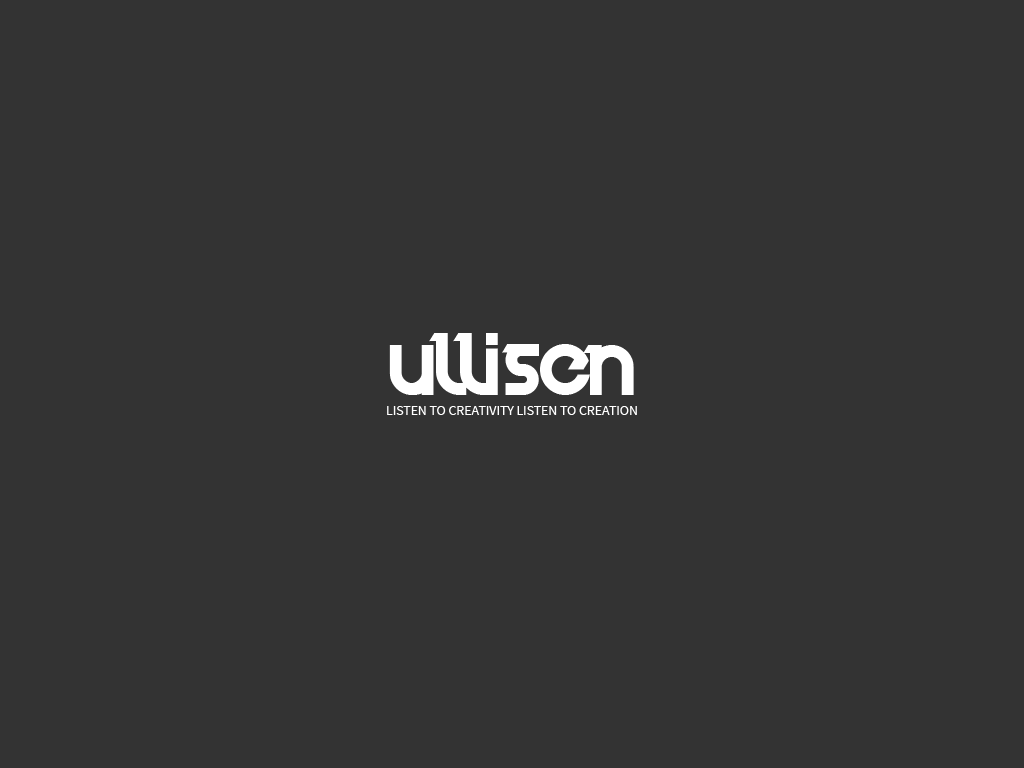
<style>
.page{position:relative;width:1024px;height:768px;background:#333333}
.page>*{position:absolute;margin:0}
.t1{font:72px "Velocity";color:#ffffff}
.t2{font:14px "SourceSansPro-Regular";letter-spacing:-0.005em;color:#ffffff}
</style>
<div class="page">
<p class="t1" style="left:389px;top:333px;width:245px;height:62px">ULLISEN</p>
<p class="t2" style="left:387px;top:406px;width:250px;height:9px">LISTEN TO CREATIVITY LISTEN TO CREATION</p>
</div>
